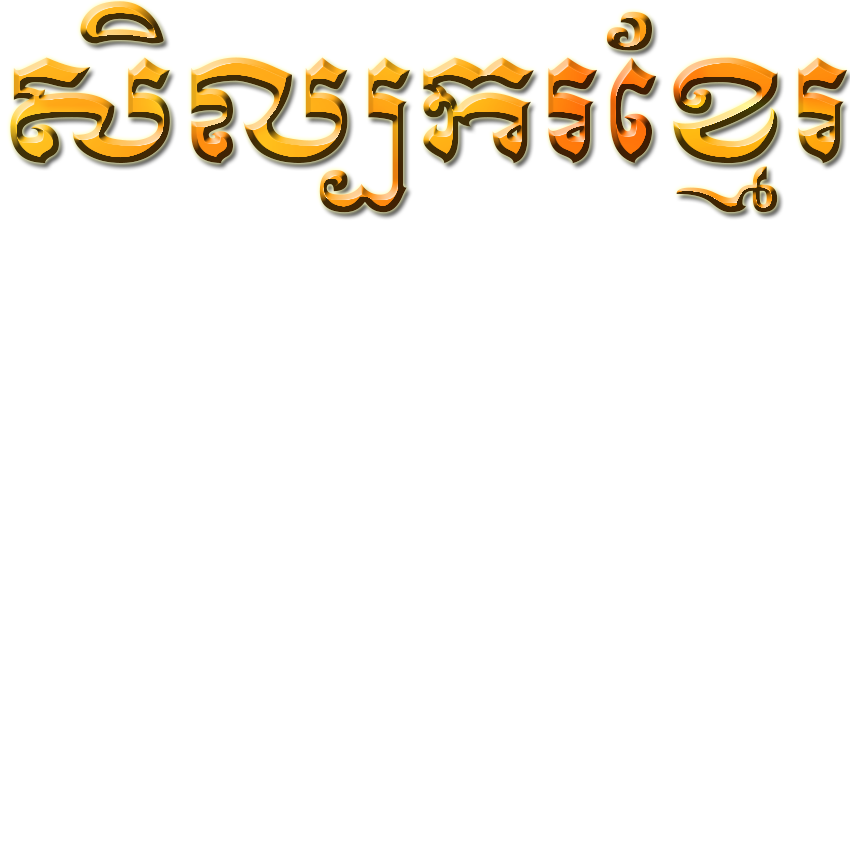
<style>
.page{position:relative;width:850px;height:850px;background:#ffffff}
.page>*{position:absolute;margin:0}
.t1{font:144.3px "KhmerOSmuol"}
</style>
<div class="page">
<p class="t1" style="left:10px;top:1px;width:837px;height:212px">សិល្បករខ្មែរ</p>
</div>
